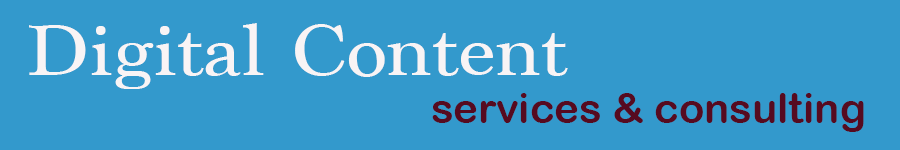
<style>
.page{position:relative;width:900px;height:150px;background:#3399cc}
.page>*{position:absolute;margin:0}
.t1{font:75px "Marion-Regular";color:#f8f4f5;scale:1.13 1}
.t2{font:41.7px "ArialRoundedMTBold";color:#560b20}
</style>
<div class="page">
<p class="t1" style="left:29px;top:23px;width:539px;height:66px">Digital Content</p>
<p class="t2" style="left:432px;top:93px;width:432px;height:39px">services &amp; consulting</p>
</div>
